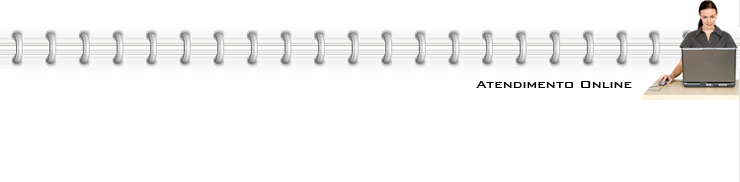
<style>
.page{position:relative;width:740px;height:182px;background:#ffffff}
.page>*{position:absolute;margin:0}
.t1{font:14px "BankGothicBT-Medium";color:#030303}
</style>
<div class="page">
<p class="t1" style="left:476px;top:81px;width:156px;height:7px">Atendimento Online</p>
</div>
